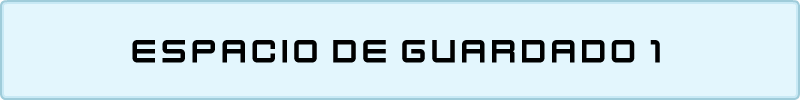
<style>
.page{position:relative;width:800px;height:100px;background:#e3f6fd}
.page>*{position:absolute;margin:0}
.t1{font:36px "KenVector-Future";color:#000000}
</style>
<div class="page">
<p class="t1" style="left:132px;top:40px;width:528px;height:23px">espacio de guardado 1</p>
</div>
